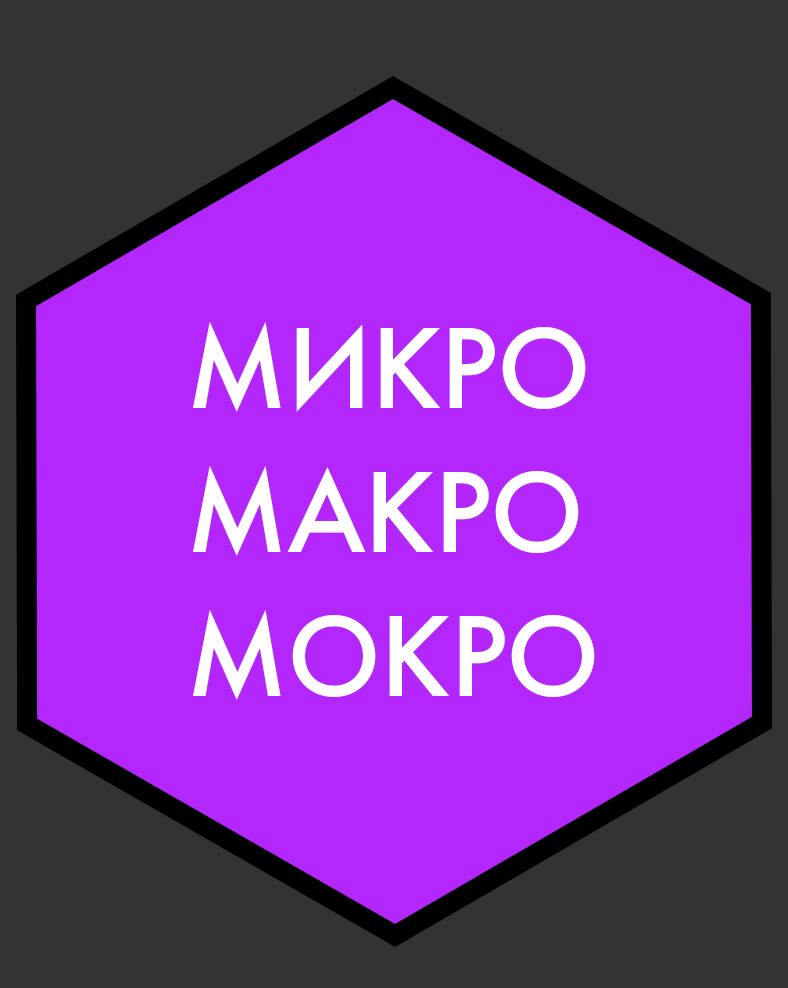
<style>
.page{position:relative;width:788px;height:988px;background:#b326fc}
.page>*{position:absolute;margin:0}
.t1{font:120px "FuturaPT-Medium";letter-spacing:-0.005em;color:#ffffff}
</style>
<div class="page">
<p class="t1" style="left:193px;top:322px;width:402px;height:378px">МИКРО<br>МАКРО<br>МОКРО</p>
</div>
